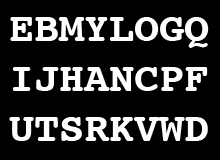
<style>
.page{position:relative;width:220px;height:160px;background:#000000}
.page>*{position:absolute;margin:0}
.t1{font:41.7px "Courier-Bold";color:#ffffff}
</style>
<div class="page">
<p class="t1" style="left:9px;top:17px;width:200px;height:124px">EBMYLOGQ<br>IJHANCPF<br>UTSRKVWD</p>
</div>
